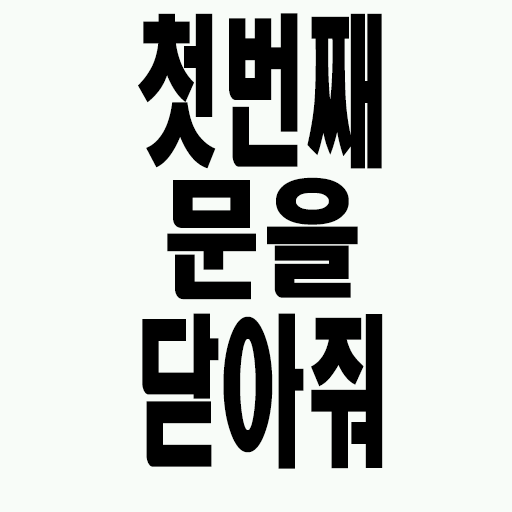
<style>
.page{position:relative;width:512px;height:512px;background:#f8fcf8}
.page>*{position:absolute;margin:0}
.t1{font:161.5px/150px "HeadlineR-HM";color:#000000;scale:0.53 1}
.t2{font:127.3px/150px "HeadlineR-HM";color:#000000;scale:0.79 1}
</style>
<div class="page">
<p class="t1" style="left:138px;top:13px;width:245px;height:456px;text-align:center">첫번째<br><span class="t2">문을<br></span>닫아줘</p>
</div>
